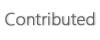
<style>
.page{position:relative;width:100px;height:40px;background:#ffffff}
.page>*{position:absolute;margin:0}
.t1{font:16px "MicrosoftYaHeiLight";color:#646464;font-weight:bold}
</style>
<div class="page">
<p class="t1" style="left:5px;top:12px;width:90px;height:14px">Contributed</p>
</div>
